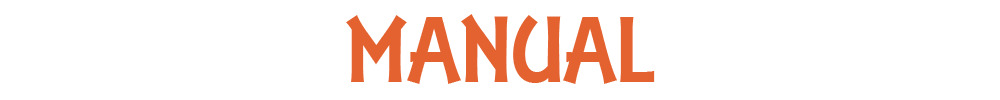
<style>
.page{position:relative;width:1000px;height:100px;background:#ffffff}
.page>*{position:absolute;margin:0}
.t1{font:100px "ARESSENCE";color:#e4622f}
</style>
<div class="page">
<p class="t1" style="left:346px;top:14px;width:309px;height:70px">MANUAL</p>
</div>
